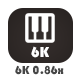
<style>
.page{position:relative;width:80px;height:80px;background:#ffffff}
.page>*{position:absolute;margin:0}
.t1{font:15px "Bauhaus93";color:#ffffff}
.t2{font:12px "Bauhaus93";color:#464646}
</style>
<div class="page">
<p class="t1" style="left:31px;top:46px;width:18px;height:12px">6K</p>
<p class="t2" style="left:15px;top:65px;width:49px;height:10px">6K 0.86x</p>
</div>
